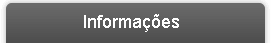
<style>
.page{position:relative;width:271px;height:43px}
.page>*{position:absolute;margin:0}
.t1{font:18px "ArialMT";color:#ffffff}
</style>
<div class="page">
<p class="t1" style="left:84px;top:14px;width:95px;height:18px">Informações</p>
</div>
